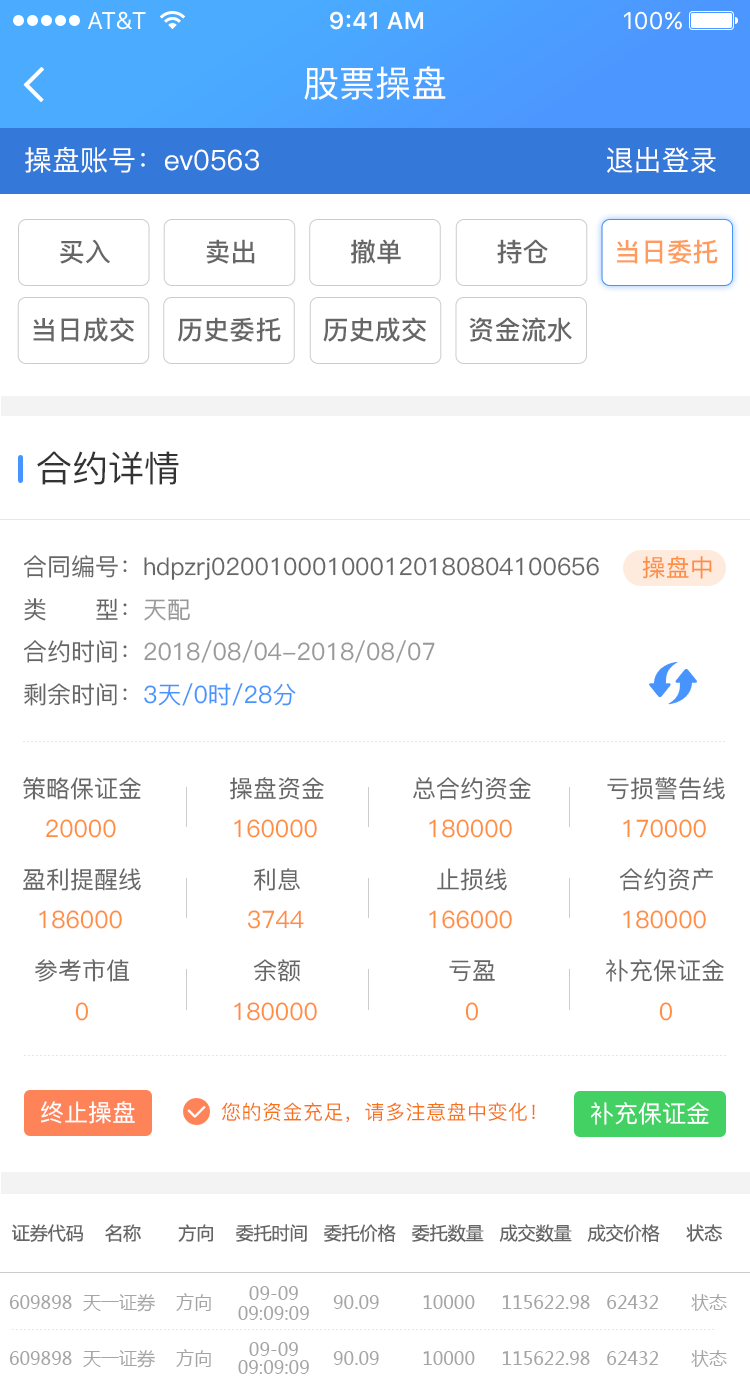
<style>
.page{position:relative;width:750px;height:1386px;background:#ffffff}
.page>*{position:absolute;margin:0}
.t1{font:36px "PingFang-SC-Medium";color:#ffffff}
.t2{font:28px "PingFang-SC-Medium";color:#ffffff}
.t3{font:26px "PingFang-SC-Bold";color:#666666}
.t4{font:26px "PingFang-SC-Bold";color:#ff9b5c}
.t5{font:36px "PingFang-SC-Medium";color:#333333}
.t6{font:24px "PingFang-SC-Medium";color:#666666}
.t7{font:24px "PingFang-SC-Medium";color:#ff8e42}
.t8{font:24px "PingFang-SC-Medium";color:#999999}
.t9{font:24px "PingFang-SC-Medium";color:#4794ff}
.t10{font:24px "PingFang-SC-Medium";color:#ffffff}
.t11{font:20px "PingFang-SC-Medium";letter-spacing:0.025em;color:#f77116}
.t12{font:18px "MicrosoftYaHei";color:#666666}
.t13{font:18px "MicrosoftYaHei";color:#a5a5a5}
</style>
<div class="page">
<p class="t1" style="left:304px;top:66px;width:142px;height:34px">股票操盘</p>
<p class="t2" style="left:25px;top:146px;width:691px;height:27px">操盘账号：ev0563                                     退出登录</p>
<p class="t3" style="left:60px;top:239px;width:50px;height:25px">买入</p>
<p class="t3" style="left:206px;top:239px;width:49px;height:25px">卖出</p>
<p class="t3" style="left:350px;top:239px;width:51px;height:25px">撤单</p>
<p class="t3" style="left:497px;top:239px;width:51px;height:25px">持仓</p>
<p class="t4" style="left:617px;top:239px;width:101px;height:25px">当日委托</p>
<p class="t3" style="left:33px;top:317px;width:101px;height:25px">当日成交</p>
<p class="t3" style="left:178px;top:317px;width:103px;height:25px">历史委托</p>
<p class="t3" style="left:323px;top:317px;width:103px;height:25px">历史成交</p>
<p class="t3" style="left:469px;top:317px;width:103px;height:25px">资金流水</p>
<p class="t5" style="left:37px;top:451px;width:142px;height:34px">合约详情</p>
<p class="t6" style="left:23px;top:555px;width:576px;height:25px">合同编号：hdpzrj020010001000120180804100656</p>
<p class="t7" style="left:642px;top:556px;width:70px;height:23px">操盘中</p>
<p class="t6" style="left:24px;top:598px;width:166px;height:23px">类      型：<span class="t8">天配</span></p>
<p class="t8" style="left:23px;top:640px;width:412px;height:23px"><span class="t6">合约时间：</span>2018/08/04-2018/08/07</p>
<p class="t9" style="left:24px;top:683px;width:272px;height:23px"><span class="t6">剩余时间：</span>3天/0时/28分</p>
<p class="t6" style="left:23px;top:777px;width:118px;height:23px">策略保证金</p>
<p class="t6" style="left:230px;top:777px;width:94px;height:23px">操盘资金</p>
<p class="t6" style="left:413px;top:777px;width:118px;height:23px">总合约资金</p>
<p class="t6" style="left:607px;top:777px;width:118px;height:23px">亏损警告线</p>
<p class="t7" style="left:46px;top:819px;width:70px;height:19px">20000</p>
<p class="t7" style="left:234px;top:819px;width:83px;height:19px">160000</p>
<p class="t7" style="left:429px;top:819px;width:83px;height:19px">180000</p>
<p class="t7" style="left:623px;top:819px;width:83px;height:19px">170000</p>
<p class="t6" style="left:23px;top:868px;width:118px;height:23px">盈利提醒线</p>
<p class="t6" style="left:254px;top:868px;width:46px;height:23px">利息</p>
<p class="t6" style="left:437px;top:868px;width:70px;height:23px">止损线</p>
<p class="t6" style="left:619px;top:868px;width:94px;height:23px">合约资产</p>
<p class="t7" style="left:39px;top:910px;width:83px;height:19px">186000</p>
<p class="t7" style="left:248px;top:910px;width:56px;height:19px">3744</p>
<p class="t7" style="left:429px;top:910px;width:83px;height:19px">166000</p>
<p class="t7" style="left:623px;top:910px;width:83px;height:19px">180000</p>
<p class="t6" style="left:35px;top:959px;width:95px;height:23px">参考市值</p>
<p class="t6" style="left:253px;top:959px;width:48px;height:23px">余额</p>
<p class="t6" style="left:449px;top:960px;width:46px;height:22px">亏盈</p>
<p class="t6" style="left:606px;top:959px;width:118px;height:23px">补充保证金</p>
<p class="t7" style="left:75px;top:1002px;width:14px;height:19px">0</p>
<p class="t7" style="left:234px;top:1002px;width:83px;height:19px">180000</p>
<p class="t7" style="left:465px;top:1002px;width:14px;height:19px">0</p>
<p class="t7" style="left:659px;top:1002px;width:14px;height:19px">0</p>
<p class="t10" style="left:41px;top:1101px;width:94px;height:23px">终止操盘</p>
<p class="t11" style="left:221px;top:1102px;width:314px;height:21px">您的资金充足，请多注意盘中变化！</p>
<p class="t10" style="left:591px;top:1102px;width:118px;height:23px">补充保证金</p>
<p class="t12" style="left:12px;top:1224px;width:710px;height:18px">证券代码    名称       方向    委托时间   委托价格   委托数量   成交数量   成交价格     状态</p>
<p class="t13" style="left:249px;top:1286px;width:49px;height:14px">09-09</p>
<p class="t13" style="left:9px;top:1293px;width:202px;height:19px">609898  天一证券    方向</p>
<p class="t13" style="left:333px;top:1294px;width:394px;height:17px">90.09        10000     115622.98   62432      状态</p>
<p class="t13" style="left:238px;top:1306px;width:71px;height:14px">09:09:09</p>
<p class="t13" style="left:9px;top:1349px;width:202px;height:19px">609898  天一证券    方向</p>
<p class="t13" style="left:249px;top:1342px;width:49px;height:14px">09-09</p>
<p class="t13" style="left:333px;top:1350px;width:394px;height:17px">90.09        10000     115622.98   62432      状态</p>
<p class="t13" style="left:238px;top:1360px;width:71px;height:14px">09:09:09</p>
</div>
